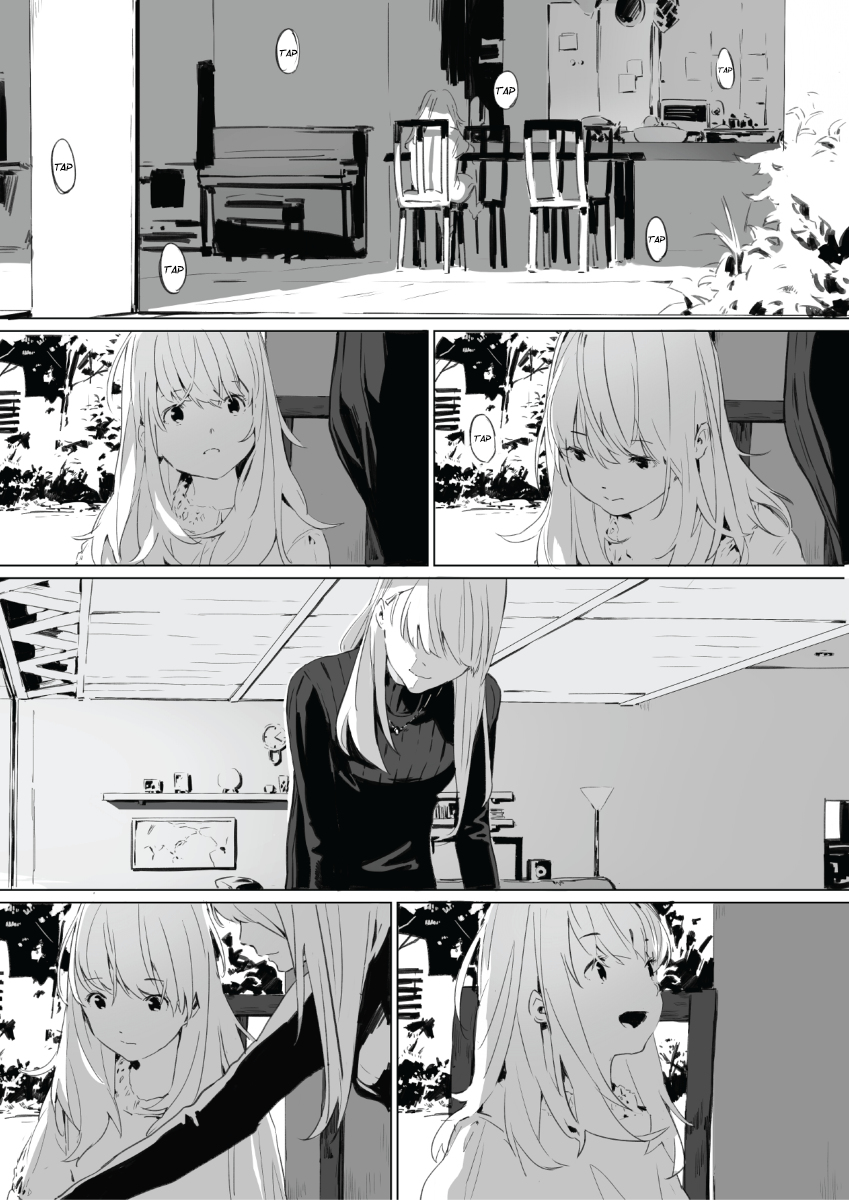
<style>
.page{position:relative;width:849px;height:1200px}
.page>*{position:absolute;margin:0}
.t1{font:10px "SFToontime";color:#000000;font-style:italic}
.t2{font:8px "SFToontime";color:#000000;font-style:italic}
.t3{font:11px "SFToontime";color:#000000;font-style:italic}
.t4{font:9.5px "SFToontime";color:#000000;font-style:italic}
</style>
<div class="page">
<p class="t1" style="left:279px;top:49px;width:19px;height:8px">tap</p>
<p class="t2" style="left:718px;top:67px;width:15px;height:6px">tap</p>
<p class="t3" style="left:495px;top:86px;width:21px;height:9px">tap</p>
<p class="t3" style="left:54px;top:163px;width:19px;height:8px">Tap</p>
<p class="t4" style="left:648px;top:236px;width:18px;height:7px">tap</p>
<p class="t3" style="left:164px;top:265px;width:20px;height:9px">tap</p>
<p class="t4" style="left:474px;top:435px;width:18px;height:7px">tap</p>
</div>
